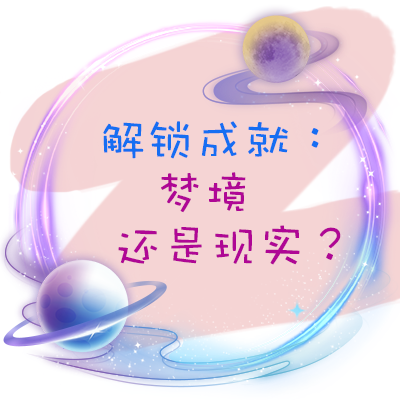
<style>
.page{position:relative;width:400px;height:400px;background:#f5d4d4}
.page>*{position:absolute;margin:0}
.t1{font:48px "DFWaWaSC-W5";color:#166ef2}
.t2{font:48px "DFWaWaSC-W5";color:#af0795}
</style>
<div class="page">
<p class="t1" style="left:103px;top:121px;width:216px;height:38px">解锁成就：</p>
<p class="t2" style="left:161px;top:172px;width:85px;height:41px">梦境</p>
<p class="t2" style="left:118px;top:225px;width:223px;height:40px">还是现实？</p>
</div>
